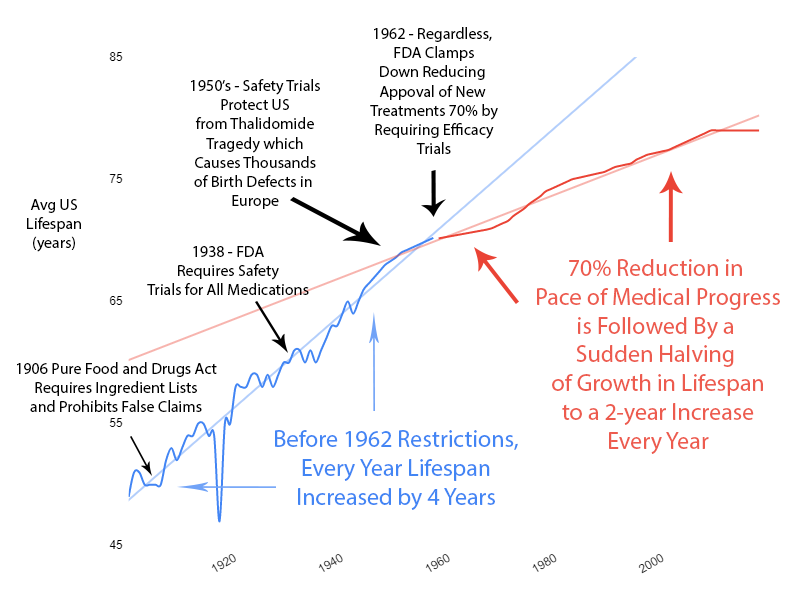
<style>
.page{position:relative;width:808px;height:595px;background:#ffffff}
.page>*{position:absolute;margin:0}
.t1{font:12px "MyriadPro-Regular";color:#000000}
.t2{font:24px "MyriadPro-Regular";color:#ed5b4e}
.t3{font:24px "MyriadPro-Regular";color:#4285f4}
</style>
<div class="page">
<p class="t1" style="left:370px;top:27px;width:128px;height:127px;text-align:center">1962 - Regardless, <br>FDA Clamps<br>Down Reducing <br>Appoval of New <br>Treatments 70% by<br>Requiring Efficacy<br>Trials</p>
<p class="t1" style="left:191px;top:79px;width:129px;height:130px;text-align:center">1950’s - Safety Trials<br>Protect US<br>from Thalidomide<br>Tragedy which<br>Causes Thousands<br>of Birth Defects in <br>Europe</p>
<p class="t1" style="left:27px;top:199px;width:54px;height:53px;text-align:center">Avg US<br>Lifespan<br>(years)</p>
<p class="t1" style="left:147px;top:246px;width:162px;height:50px;text-align:center">1938 - FDA<br>Requires Safety<br>Trials for All Medications</p>
<p class="t2" style="left:537px;top:259px;width:243px;height:195px;text-align:center">70% Reduction in <br>Pace of Medical Progress<br>is Followed By a <br>Sudden Halving <br>of Growth in Lifespan<br>to a 2-year Increase<br>Every Year</p>
<p class="t1" style="left:17px;top:362px;width:200px;height:50px;text-align:center">1906 Pure Food and Drugs Act<br>Requires Ingredient Lists<br>and Prohibits False Claims</p>
<p class="t3" style="left:275px;top:430px;width:243px;height:80px;text-align:center">Before 1962 Restrictions,<br>Every Year Lifespan<br>Increased by 4 Years</p>
</div>
